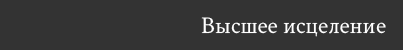
<style>
.page{position:relative;width:403px;height:50px;background:#333333}
.page>*{position:absolute;margin:0}
.t1{font:24px "CrimsonText-Regular";color:#ffffff}
</style>
<div class="page">
<p class="t1" style="left:201px;top:17px;width:185px;height:20px">Высшее исцеление</p>
</div>
